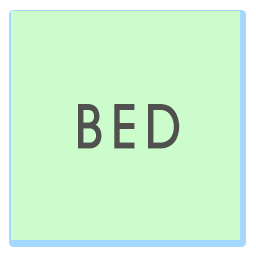
<style>
.page{position:relative;width:256px;height:256px;background:#ccfccb}
.page>*{position:absolute;margin:0}
.t1{font:60px "AvantGarde-Medium";letter-spacing:0.15em;color:#50514f;text-transform:uppercase;scale:0.84 1}
</style>
<div class="page">
<p class="t1" style="left:78px;top:104px;width:102px;height:45px">BED</p>
</div>
